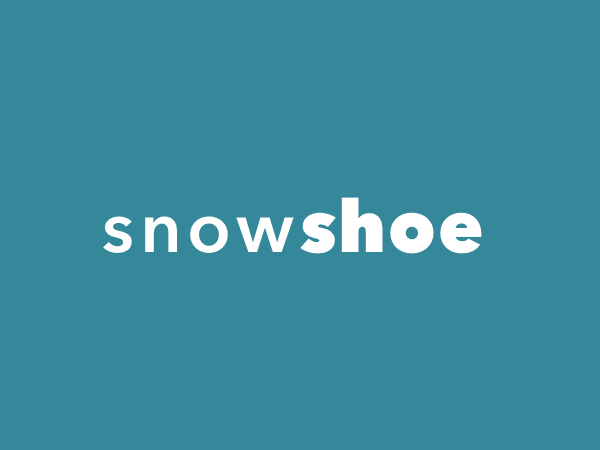
<style>
.page{position:relative;width:600px;height:450px;background:#348899}
.page>*{position:absolute;margin:0}
.t1{font:72px "AvenirNext-DemiBold";letter-spacing:0.075em;color:#ffffff}
.t2{font:72px "AvenirNext-Heavy";letter-spacing:0.025em;color:#ffffff}
</style>
<div class="page">
<p class="t1" style="left:103px;top:197px;width:379px;height:57px">snow<span class="t2">shoe</span></p>
</div>
